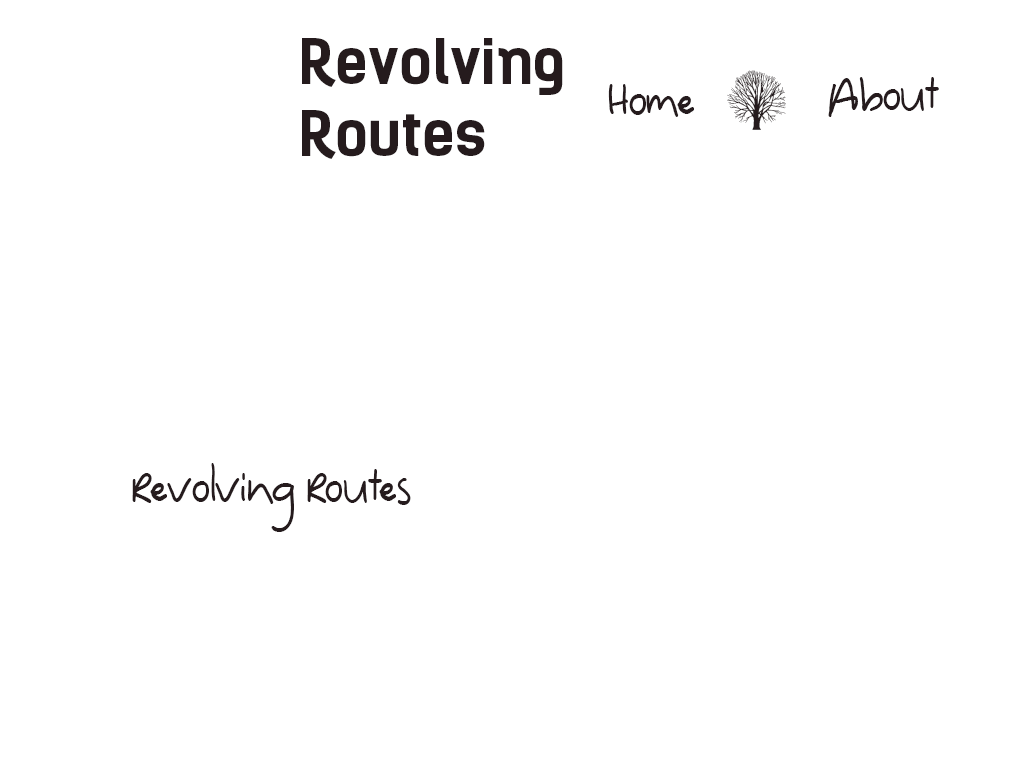
<style>
.page{position:relative;width:1024px;height:768px;background:#ffffff}
.page>*{position:absolute;margin:0}
.t1{font:60px "Kelson-Bold";color:#251b1d}
.t2{font:60px "Wmtrees1";color:#251b1d}
.t3{font:60px "Dinosaur";color:#251b1d}
</style>
<div class="page">
<p class="t1" style="left:302px;top:38px;width:261px;height:121px">Revolving <br>Routes</p>
<p class="t2" style="left:727px;top:70px;width:59px;height:60px">s</p>
<p class="t3" style="left:828px;top:77px;width:111px;height:40px">About</p>
<p class="t3" style="left:608px;top:84px;width:86px;height:33px">Home</p>
<p class="t3" style="left:132px;top:463px;width:279px;height:69px">Revolving Routes</p>
</div>
